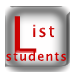
<style>
.page{position:relative;width:75px;height:75px;background:#ffffff}
.page>*{position:absolute;margin:0}
.t1{font:50px "LucidaSansUnicode";letter-spacing:0.1em;color:#cd0101}
.t2{font:16.7px "LucidaSansUnicode";letter-spacing:0.1em;color:#cd0101}
.t3{font:12.5px "LucidaSansUnicode";letter-spacing:0.1em;color:#cd0101}
</style>
<div class="page">
<p class="t1" style="left:14px;top:16px;width:23px;height:37px">L</p>
<p class="t2" style="left:33px;top:24px;width:22px;height:14px">ist</p>
<p class="t3" style="left:6px;top:51px;width:60px;height:10px">students</p>
</div>
